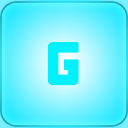
<style>
.page{position:relative;width:128px;height:128px}
.page>*{position:absolute;margin:0}
.t1{font:72px "UyghurDemo";color:#00f0fc;font-variant:small-caps;font-weight:bold}
</style>
<div class="page">
<p class="t1" style="left:47px;top:42px;width:32px;height:44px">g</p>
</div>
